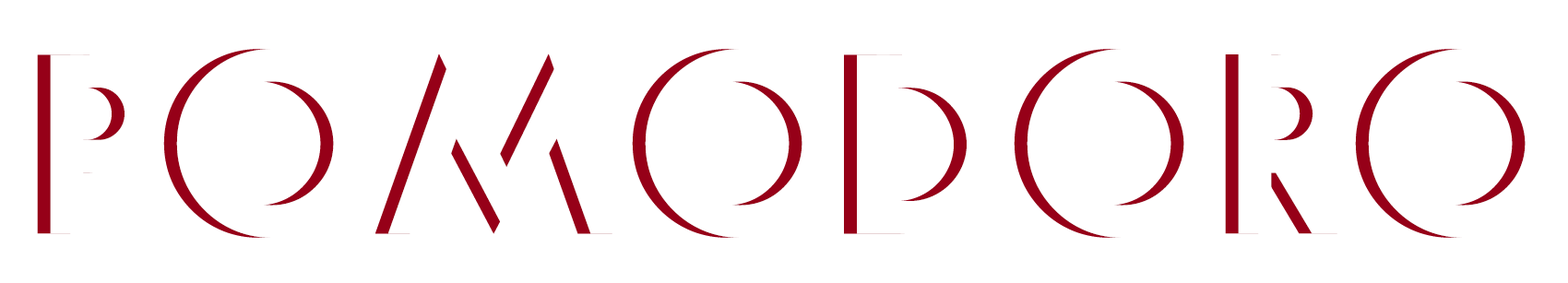
<style>
.page{position:relative;width:1568px;height:283px;background:#ffffff}
.page>*{position:absolute;margin:0}
.t1{font:317.5px "NOVAegular";letter-spacing:0.04em;color:#ffffff}
</style>
<div class="page">
<p class="t1" style="left:37px;top:49px;width:1508px;height:189px">Pomodoro</p>
</div>
